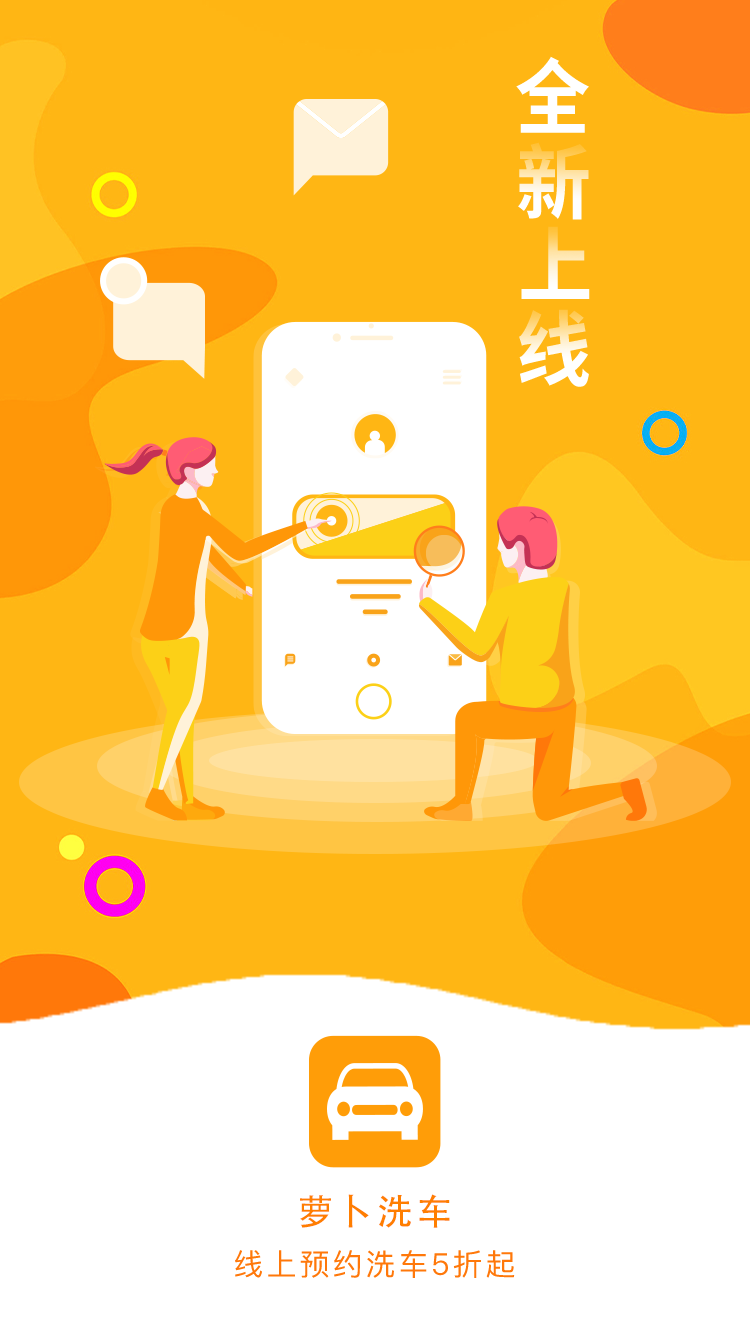
<style>
.page{position:relative;width:750px;height:1334px;background:#ffb614}
.page>*{position:absolute;margin:0}
.t1{font:82.4px "SourceHanSansCN-Bold";color:#ffffff;scale:0.91 1}
.t2{font:82.4px "SourceHanSansCN-Bold";scale:0.91 1}
.t3{font:36px "AdobeHeitiStd-Regular";letter-spacing:0.1em;color:#ff7e00}
.t4{font:36px "AdobeHeitiStd-Regular";letter-spacing:0.1em;color:#ff7e00;text-transform:uppercase}
.t5{font:30px "PingFang-SC-Medium";letter-spacing:0.1em;color:#ff780a}
</style>
<div class="page">
<p class="t1" style="left:516px;top:56px;width:73px;height:77px">全</p>
<p class="t2" style="left:518px;top:142px;width:71px;height:78px">新</p>
<p class="t2" style="left:521px;top:226px;width:69px;height:73px">上</p>
<p class="t2" style="left:519px;top:309px;width:70px;height:78px">线</p>
<p class="t3" style="left:300px;top:1194px;width:150px;height:34px">萝卜<span class="t4">洗车</span></p>
<p class="t5" style="left:235px;top:1250px;width:280px;height:28px">线上预约洗车5折起</p>
</div>
